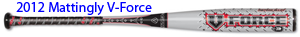
<style>
.page{position:relative;width:300px;height:37px;background:#ffffff}
.page>*{position:absolute;margin:0}
.t1{font:14px "MyriadPro-Regular";color:#0000ff}
</style>
<div class="page">
<p class="t1" style="left:16px;top:2px;width:136px;height:13px">2012 Mattingly V-Force</p>
</div>
